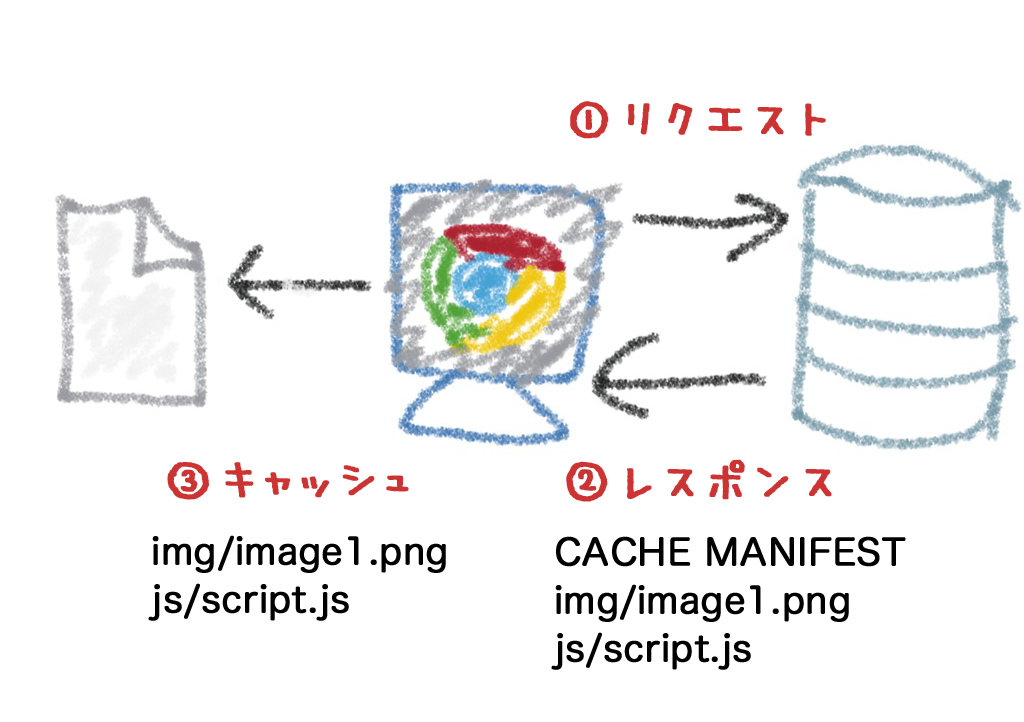
<style>
.page{position:relative;width:1024px;height:722px;background:#ffffff}
.page>*{position:absolute;margin:0}
.t1{font:80px "MiuraLiner-Jr";color:#cc3434;font-weight:bold}
.t2{font:36px/48px "HiraMaruProN-W4";color:#000000;font-weight:bold}
</style>
<div class="page">
<p class="t1" style="left:570px;top:101px;width:256px;height:38px">①リクエスト</p>
<p class="t1" style="left:167px;top:462px;width:242px;height:38px">③キャッシュ</p>
<p class="t1" style="left:566px;top:459px;width:266px;height:43px">②レスポンス</p>
<p class="t2" style="left:148px;top:535px;width:298px;height:86px">img/image1.png<br>js/script.js</p>
<p class="t2" style="left:551px;top:536px;width:355px;height:134px">CACHE MANIFEST<br>img/image1.png<br>js/script.js</p>
</div>
